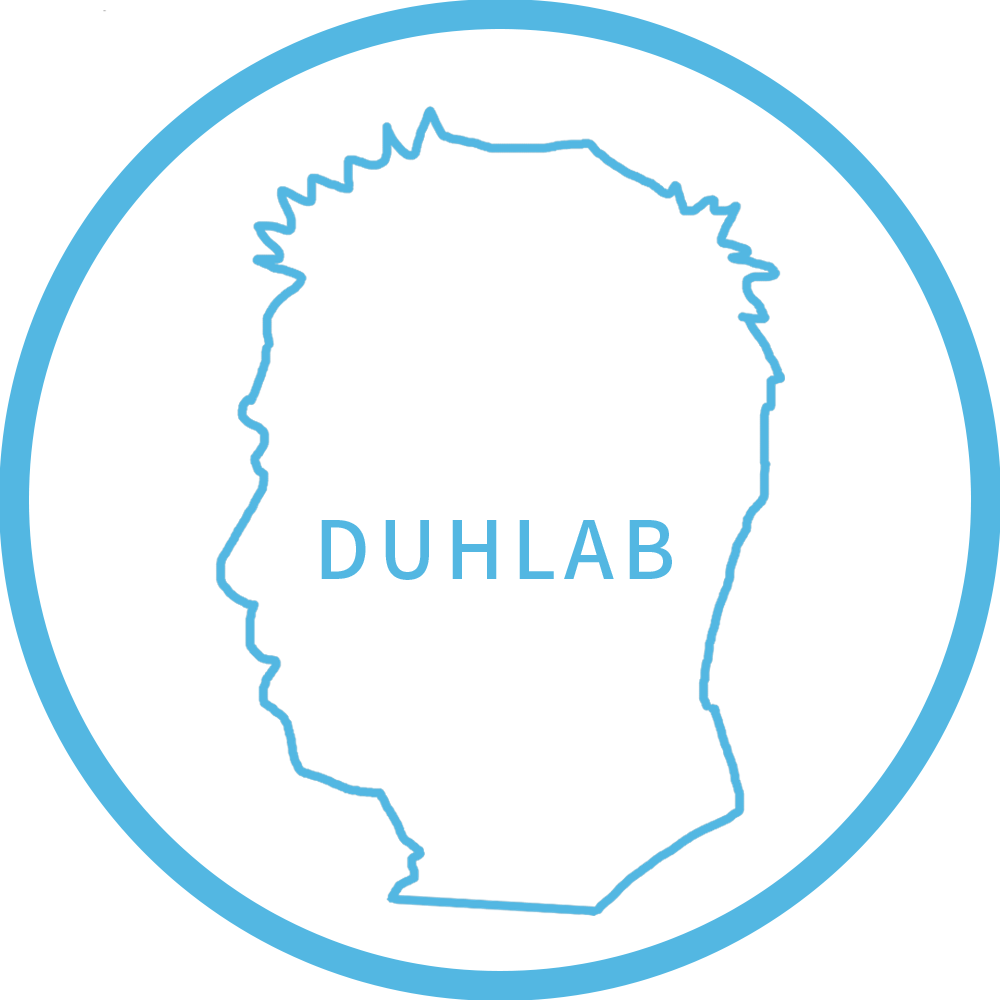
<style>
.page{position:relative;width:1000px;height:1000px;background:#ffffff}
.page>*{position:absolute;margin:0}
.t1{font:80px "NotoSansCJKtc-Medium";letter-spacing:0.1em;color:#53b7e2}
</style>
<div class="page">
<p class="t1" style="left:321px;top:520px;width:351px;height:60px">DUHLAB</p>
</div>
